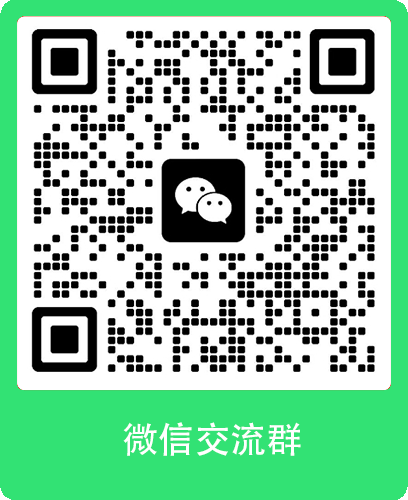
<style>
.page{position:relative;width:408px;height:500px;background:#ffffff}
.page>*{position:absolute;margin:0}
.t1{font:36px "AdobeHeitiStd-Regular";color:#ffffff}
</style>
<div class="page">
<p class="t1" style="left:123px;top:422px;width:178px;height:34px">微信交流群</p>
</div>
